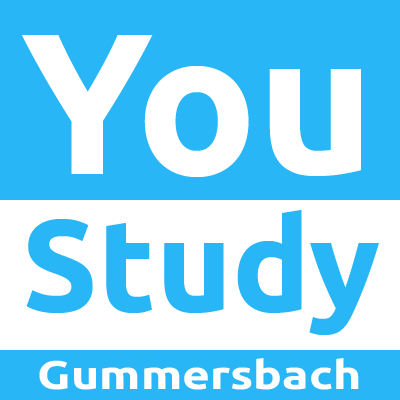
<style>
.page{position:relative;width:400px;height:400px;background:#29b6f6}
.page>*{position:absolute;margin:0}
.t1{font:200px "Ubuntu-Bold";color:#ffffff}
.t2{font:130px "Ubuntu-Bold";color:#29b6f6}
.t3{font:40px "Ubuntu-Bold";color:#ffffff;scale:1.2 1}
</style>
<div class="page">
<p class="t1" style="left:22px;top:35px;width:339px;height:142px">You</p>
<p class="t2" style="left:26px;top:210px;width:353px;height:125px">Study</p>
<p class="t3" style="left:39px;top:358px;width:320px;height:32px">Gummersbach</p>
</div>
